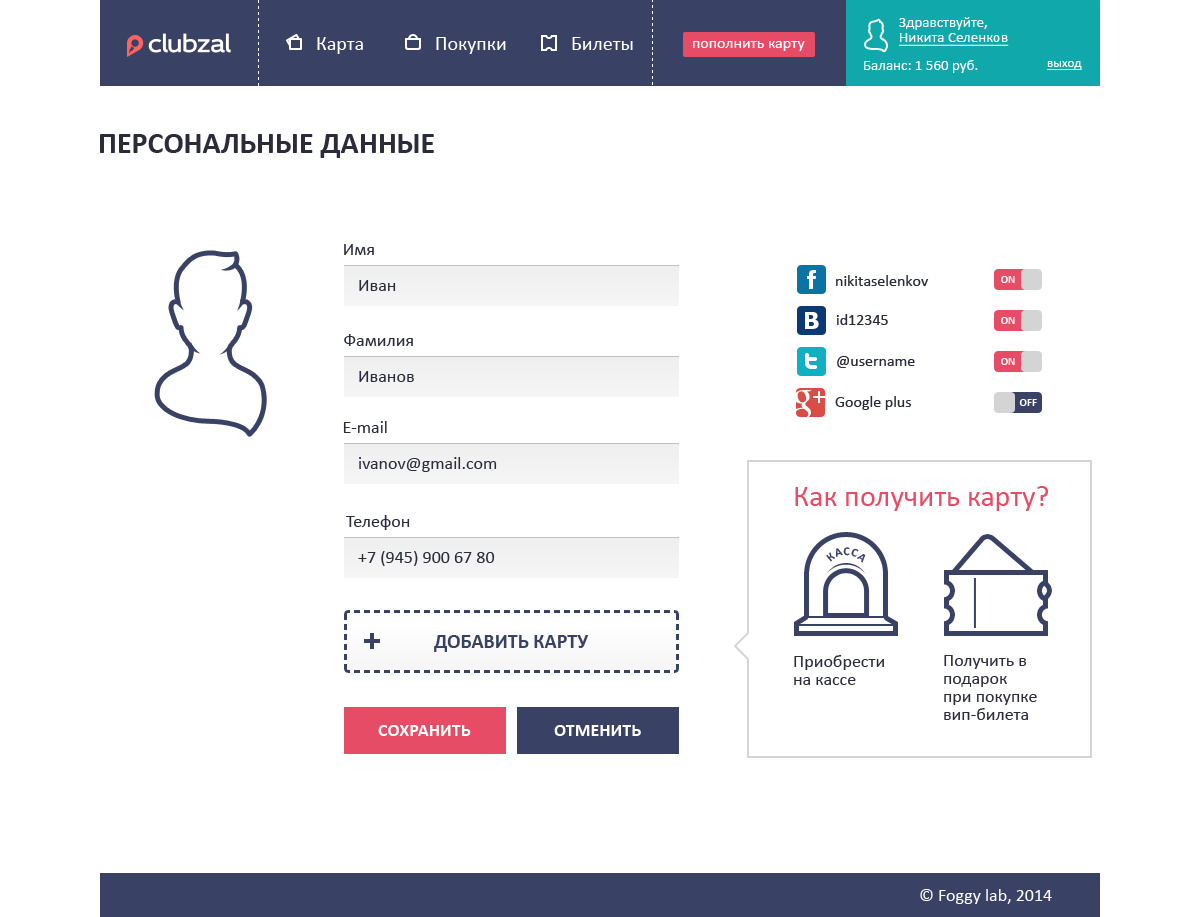
<style>
.page{position:relative;width:1200px;height:917px;background:#ffffff}
.page>*{position:absolute;margin:0}
.t1{font:15px "Calibri";color:#ffffff}
.t2{font:20px "Calibri";color:#ffffff}
.t3{font:16px "Calibri";color:#ffffff}
.t4{font:15px "Calibri";color:#ffffff;text-decoration:underline}
.t5{font:13px "Calibri";color:#ffffff;text-decoration:underline}
.t6{font:30px "Calibri-Bold";color:#2a2c3c;text-transform:uppercase}
.t7{font:18px "Calibri";color:#2a2c3c}
.t8{font:16px "Calibri";color:#2a2c3c}
.t9{font:11px "Calibri-Bold";color:#ffffff;text-transform:uppercase}
.t10{font:30px "Calibri";color:#e64c65}
.t11{font:12px "Calibri-Bold";letter-spacing:0.05em;color:#394264;text-transform:uppercase}
.t12{font:20px "Calibri-Bold";color:#394264;text-transform:uppercase}
.t13{font:18px/18px "Calibri";color:#2a2c3c}
.t14{font:18px "Calibri-Bold";color:#ffffff;text-transform:uppercase}
.t15{font:18px "Calibri";color:#ffffff}
</style>
<div class="page">
<p class="t1" style="left:899px;top:17px;width:88px;height:13px">Здравствуйте,</p>
<p class="t2" style="left:317px;top:37px;width:46px;height:17px">Карта</p>
<p class="t2" style="left:436px;top:37px;width:70px;height:17px">Покупки</p>
<p class="t2" style="left:572px;top:37px;width:61px;height:13px">Билеты</p>
<p class="t3" style="left:693px;top:41px;width:112px;height:10px">пополнить карту</p>
<p class="t4" style="left:899px;top:33px;width:110px;height:13px">Никита Селенков</p>
<p class="t1" style="left:864px;top:60px;width:114px;height:13px">Баланс: 1 560 руб.</p>
<p class="t5" style="left:1047px;top:61px;width:35px;height:9px">выход</p>
<p class="t6" style="left:100px;top:134px;width:334px;height:24px">Персональные данные</p>
<p class="t7" style="left:344px;top:244px;width:30px;height:11px">Имя</p>
<p class="t7" style="left:359px;top:280px;width:37px;height:11px">Иван</p>
<p class="t8" style="left:836px;top:275px;width:93px;height:11px">nikitaselenkov</p>
<p class="t9" style="left:1001px;top:276px;width:14px;height:7px">on</p>
<p class="t8" style="left:836px;top:314px;width:52px;height:11px">id12345</p>
<p class="t9" style="left:1001px;top:317px;width:14px;height:7px">on</p>
<p class="t7" style="left:344px;top:334px;width:69px;height:12px">Фамилия</p>
<p class="t8" style="left:837px;top:356px;width:78px;height:12px">@username</p>
<p class="t9" style="left:1001px;top:358px;width:14px;height:7px">on</p>
<p class="t7" style="left:359px;top:371px;width:55px;height:11px">Иванов</p>
<p class="t8" style="left:835px;top:396px;width:76px;height:14px">Google plus</p>
<p class="t9" style="left:1019px;top:399px;width:18px;height:7px">oFF</p>
<p class="t7" style="left:343px;top:421px;width:44px;height:12px">Е-mail</p>
<p class="t7" style="left:359px;top:457px;width:138px;height:15px">ivanov@gmail.com</p>
<p class="t10" style="left:795px;top:486px;width:253px;height:25px">Как получить карту?</p>
<p class="t7" style="left:346px;top:515px;width:64px;height:15px">Телефон</p>
<p class="t7" style="left:358px;top:551px;width:137px;height:15px">+7 (945) 900 67 80</p>
<p class="t11" style="left:826px;top:547px;width:40px;height:16px">касса</p>
<p class="t12" style="left:434px;top:635px;width:155px;height:17px">добавить карту</p>
<p class="t13" style="left:794px;top:655px;width:90px;height:30px">Приобрести<br>на кассе</p>
<p class="t13" style="left:944px;top:655px;width:93px;height:65px">Получить в<br>подарок<br>при покупке<br>вип-билета</p>
<p class="t14" style="left:378px;top:725px;width:93px;height:11px">сохранить</p>
<p class="t14" style="left:554px;top:725px;width:87px;height:11px">отменить</p>
<p class="t15" style="left:920px;top:889px;width:132px;height:15px">© Foggy lab, 2014</p>
</div>
